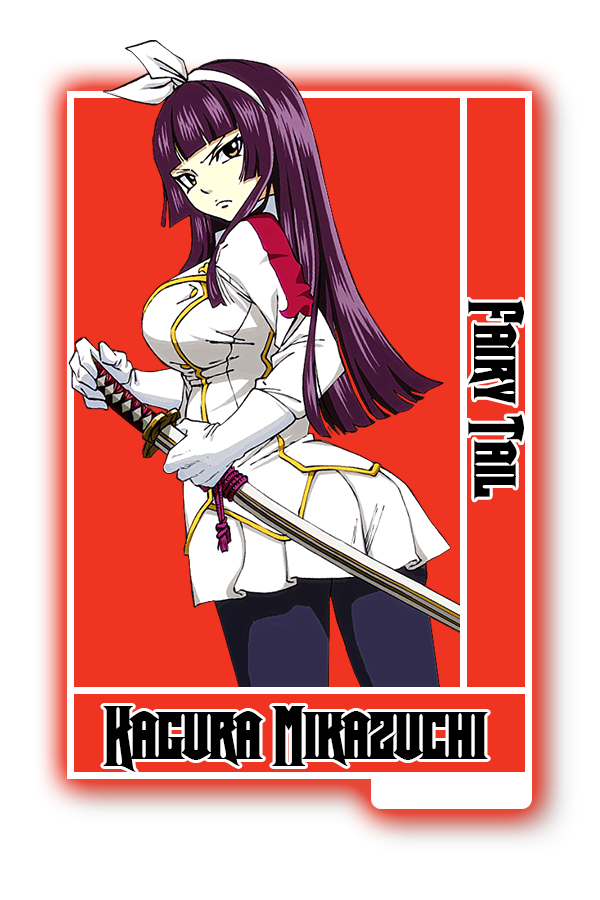
<style>
.page{position:relative;width:600px;height:900px;background:#ffffff}
.page>*{position:absolute;margin:0}
.t1{font:61.5px "Crown-Title";color:#000000}
.t2{font:70.1px "Crown-Title";color:#000000}
</style>
<div class="page">
<p class="t1" style="left:468px;top:299px;width:56px;height:201px;rotate:90deg">Fairy Tail</p>
<p class="t2" style="left:103px;top:706px;width:385px;height:66px">Kagura Mikazuchi</p>
</div>
